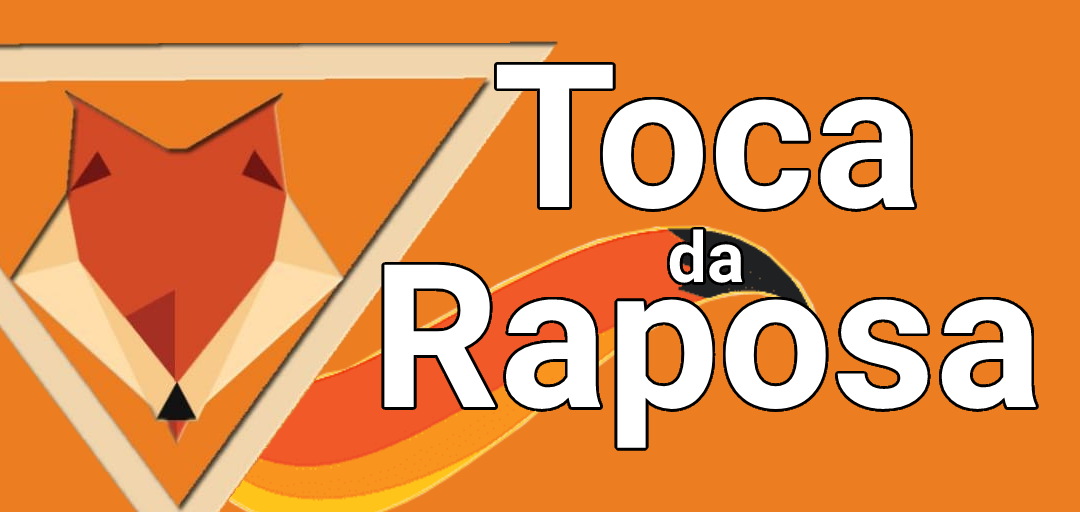
<style>
.page{position:relative;width:1080px;height:512px;background:#ec7d21}
.page>*{position:absolute;margin:0}
.t1{font:200px/200px "Roboto-Bold";color:#ffffff}
.t2{font:70px "Roboto-Bold";color:#ffffff}
</style>
<div class="page">
<p class="t1" style="left:384px;top:64px;width:652px;height:384px;text-align:center">Toca<br>Raposa</p>
<p class="t2" style="left:669px;top:229px;width:74px;height:54px">da</p>
</div>
